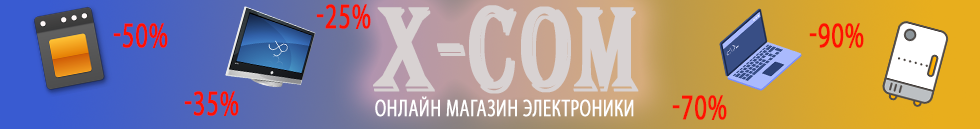
<style>
.page{position:relative;width:980px;height:129px}
.page>*{position:absolute;margin:0}
.t1{font:36px "MyriadPro-Regular";letter-spacing:0.025em;color:#ff1100;text-transform:uppercase;font-weight:bold;scale:0.67 1}
.t2{font:124px "Algerian";letter-spacing:0.025em;color:#d8d2d2;text-transform:uppercase;font-weight:bold;scale:0.67 1}
.t3{font:24px "MyriadPro-Regular";letter-spacing:0.025em;color:#ffffff;text-transform:uppercase;font-weight:bold;scale:0.67 1}
</style>
<div class="page">
<p class="t1" style="left:316px;top:4px;width:55px;height:25px">-25%</p>
<p class="t2" style="left:373px;top:5px;width:266px;height:89px">X-COM</p>
<p class="t1" style="left:113px;top:23px;width:55px;height:25px">-50%</p>
<p class="t1" style="left:809px;top:23px;width:55px;height:25px">-90%</p>
<p class="t1" style="left:184px;top:91px;width:55px;height:25px">-35%</p>
<p class="t3" style="left:375px;top:96px;width:259px;height:21px">онлайн магазин электроники</p>
<p class="t1" style="left:672px;top:95px;width:55px;height:25px">-70%</p>
</div>
